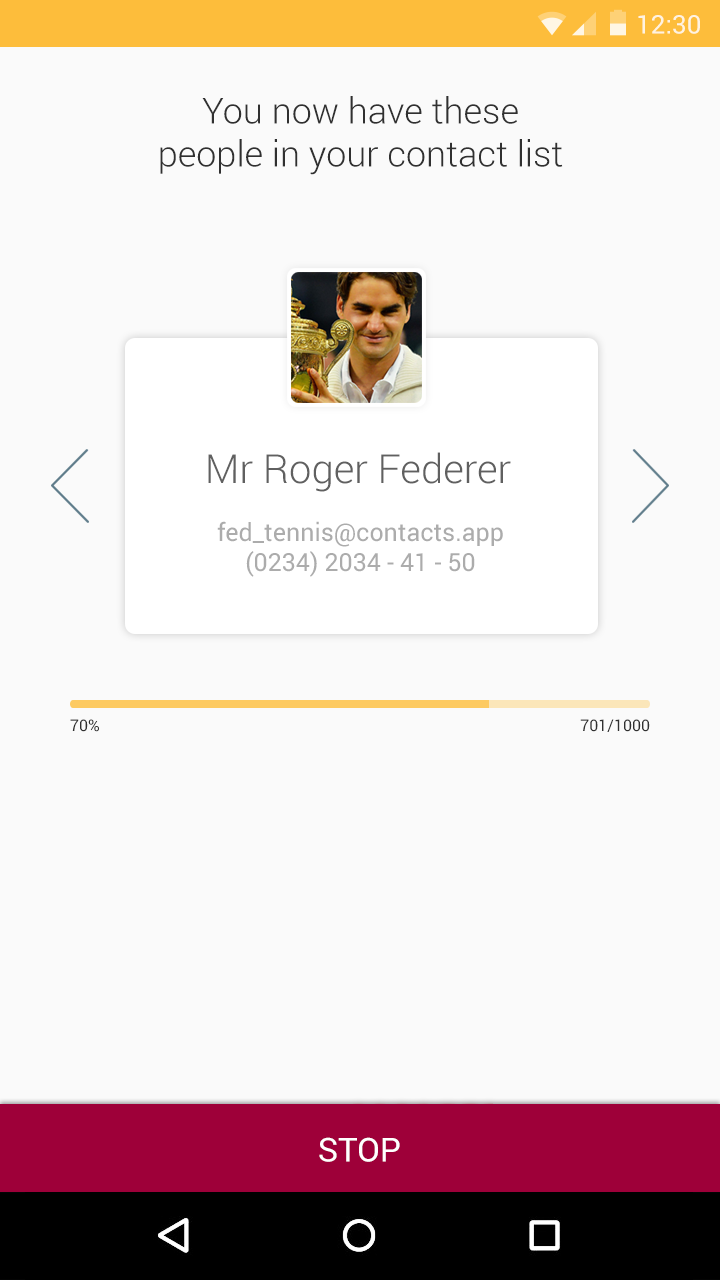
<style>
.page{position:relative;width:720px;height:1280px;background:#fafafa}
.page>*{position:absolute;margin:0}
.t1{font:36px "Roboto-Light";color:#303030}
.t2{font:40px "Roboto-Light";color:#606060}
.t3{font:25px "Roboto-Regular";color:#acacac}
.t4{font:16px "Roboto-Regular";color:#303030}
.t5{font:33px "Roboto-Regular";color:#ffffff}
</style>
<div class="page">
<p class="t1" style="left:160px;top:96px;width:403px;height:79px;text-align:center">You now have these <br>people in your contact list</p>
<p class="t2" style="left:208px;top:452px;width:303px;height:40px">Mr Roger Federer</p>
<p class="t3" style="left:217px;top:521px;width:286px;height:56px;text-align:center">fed_tennis@contacts.app<br>(0234) 2034 - 41 - 50</p>
<p class="t4" style="left:70px;top:719px;width:29px;height:13px">70%</p>
<p class="t4" style="left:580px;top:719px;width:70px;height:13px">701/1000</p>
<p class="t5" style="left:319px;top:1137px;width:81px;height:25px">STOP</p>
</div>
